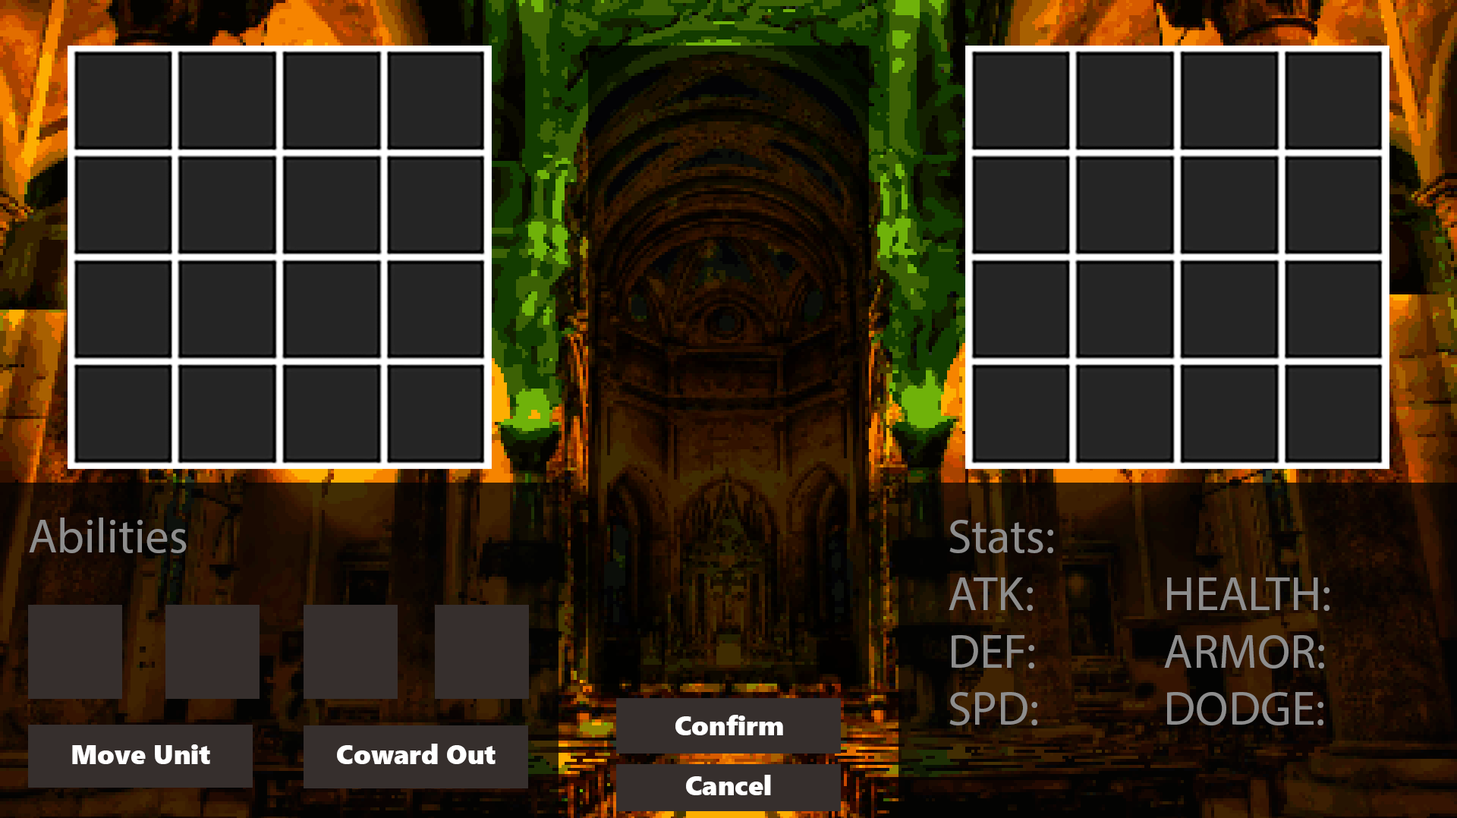
<style>
.page{position:relative;width:1457px;height:818px}
.page>*{position:absolute;margin:0}
.t1{font:47.9px "MyriadPro-Regular";color:#8d8d8d}
.t2{font:27.3px "SegoeUIBlack";color:#ffffff}
</style>
<div class="page">
<p class="t1" style="left:29px;top:518px;width:158px;height:35px">Abilities</p>
<p class="t1" style="left:949px;top:520px;width:381px;height:206px">Stats:<br>ATK:  HEALTH:<br>DEF:  ARMOR:<br>SPD:  DODGE:</p>
<p class="t2" style="left:676px;top:715px;width:107px;height:20px">Confirm</p>
<p class="t2" style="left:72px;top:745px;width:138px;height:19px">Move Unit</p>
<p class="t2" style="left:337px;top:744px;width:159px;height:20px">Coward Out</p>
<p class="t2" style="left:686px;top:775px;width:85px;height:20px">Cancel</p>
</div>
